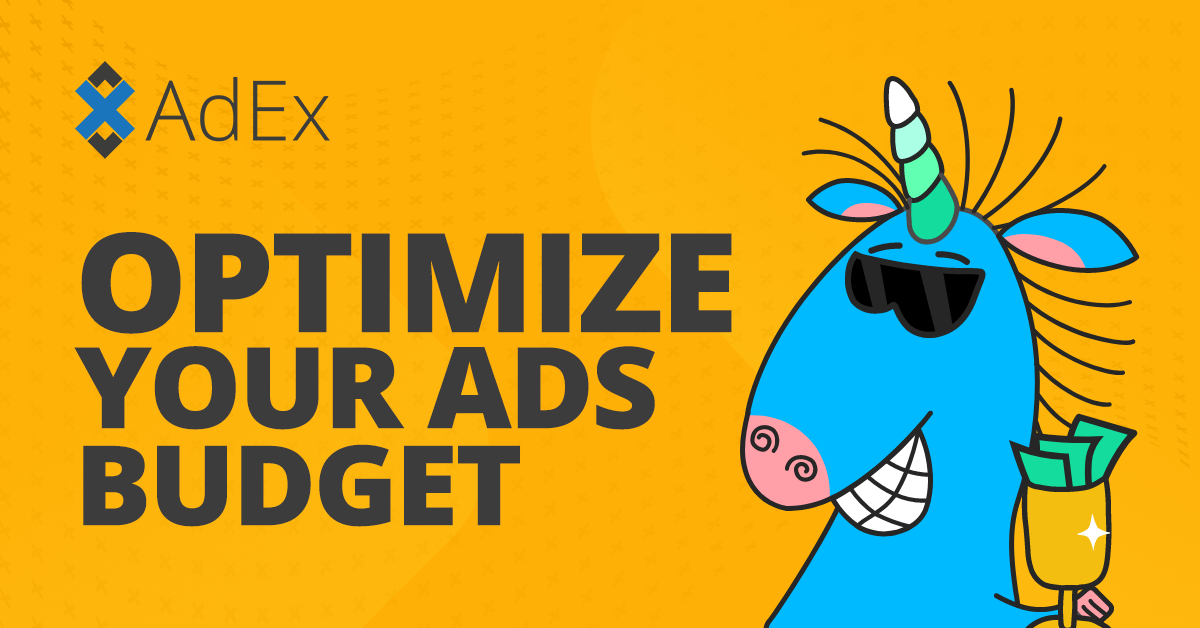
<style>
.page{position:relative;width:1200px;height:628px;background:#feb006}
.page>*{position:absolute;margin:0}
.t1{font:138px/86.6px "OpenSans-Extrabold";letter-spacing:-0.025em;color:#3c3c3c;text-transform:uppercase;scale:1.03 1}
.t2{font:113px/96px "OpenSans-Extrabold";letter-spacing:-0.025em;color:#3c3c3c;text-transform:uppercase;scale:1.03 1}
.t3{font:111px/97px "OpenSans-Extrabold";letter-spacing:-0.025em;color:#3c3c3c;text-transform:uppercase;scale:1.03 1}
</style>
<div class="page">
<p class="t1" style="left:74px;top:232px;width:658px;height:295px">optimize<br><span class="t2">your ads<br></span><span class="t3">budget</span></p>
</div>
